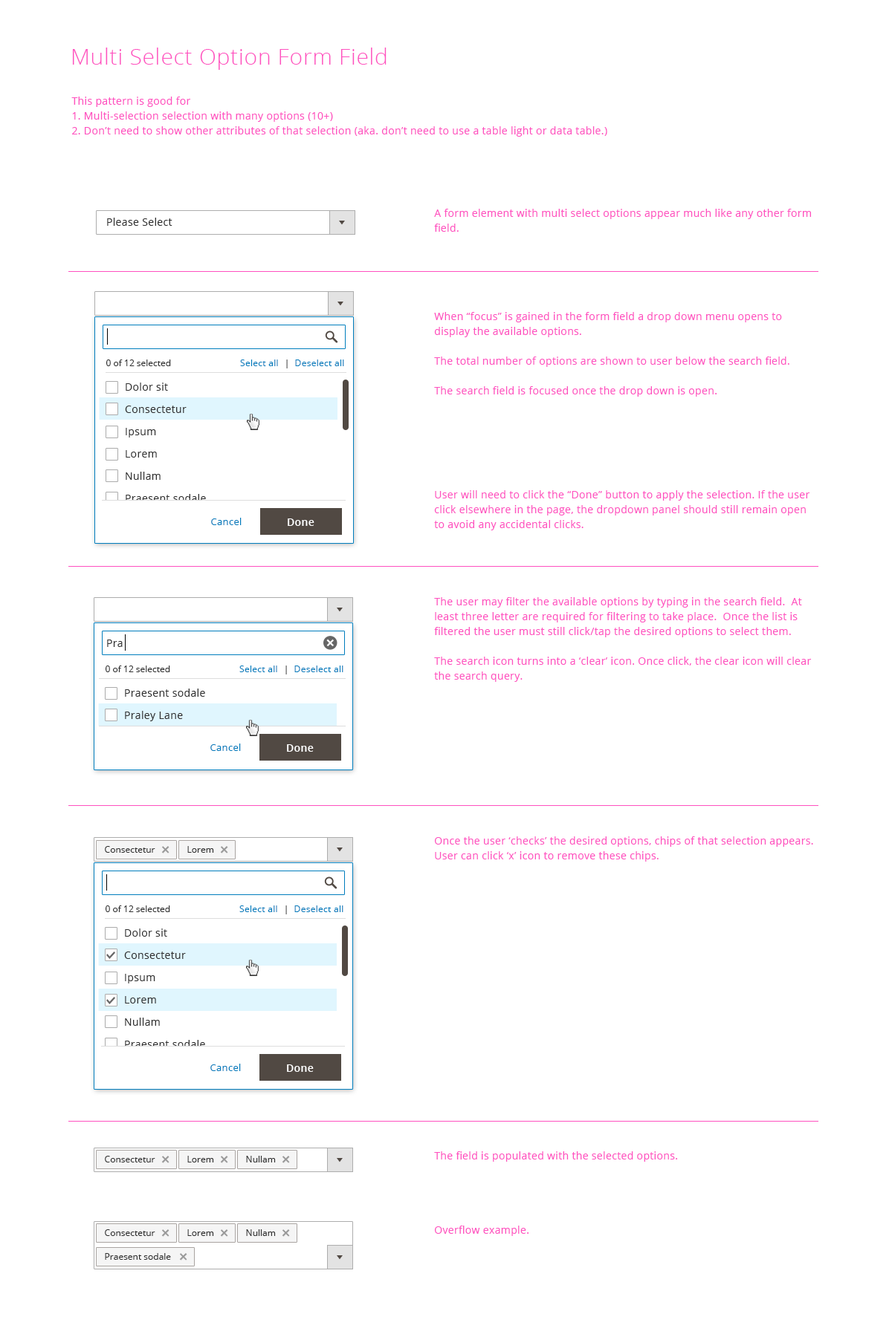
<style>
.page{position:relative;width:892px;height:1337px;background:#ffffff}
.page>*{position:absolute;margin:0}
.t1{font:22.3px "OpenSans-Light";letter-spacing:0.025em;color:#ff51c0}
.t2{font:10.4px/14.9px "OpenSans";letter-spacing:0.025em;color:#ff51c0}
.t3{font:10.4px "OpenSans";letter-spacing:0.025em;color:#303030}
.t4{font:8.9px "OpenSans";color:#303030}
.t5{font:8.9px "OpenSans";letter-spacing:0.025em;color:#007dbd}
.t6{font:8.9px "OpenSans";letter-spacing:0.025em;color:#111213}
.t7{font:10.4px/22.3px "OpenSans";letter-spacing:0.025em;color:#303030}
.t8{font:9.7px "OpenSans";letter-spacing:0.025em;color:#007dbd}
.t9{font:10.4px "OpenSans-Semibold";letter-spacing:0.025em;color:#fefefe}
.t10{font:17.8px "OpenSans-Semibold";color:#999999}
</style>
<div class="page">
<p class="t1" style="left:72px;top:48px;width:314px;height:22px">Multi Select Option Form Field</p>
<p class="t2" style="left:71px;top:97px;width:536px;height:40px">This pattern is good for <br>1. Multi-selection selection with many options (10+)<br>2. Don’t need to show other attributes of that selection (aka. don’t need to use a table light or data table.)</p>
<p class="t2" style="left:434px;top:209px;width:377px;height:23px">A form element with multi select options appear much like any other form field.</p>
<p class="t3" style="left:107px;top:218px;width:65px;height:8px">Please Select</p>
<p class="t2" style="left:434px;top:312px;width:376px;height:219px">When “focus” is gained in the form field a drop down menu opens to <br>display the available options. <br><br>The total number of options are shown to user below the search field.<br><br>The search field is focused once the drop down is open.<br><br><br><br><br><br><br>User will need to click the “Done” button to apply the selection. If the user click elsewhere in the page, the dropdown panel should still remain open<br>to avoid any accidental clicks.</p>
<p class="t4" style="left:106px;top:360px;width:65px;height:6px">0 of 12 selected</p>
<p class="t5" style="left:240px;top:360px;width:38px;height:6px">Select all</p>
<p class="t5" style="left:286px;top:360px;width:58px;height:9px"><span class="t6">|  </span>Deselect all</p>
<p class="t7" style="left:125px;top:383px;width:81px;height:119px">Dolor sit<br>Consectetur<br>Ipsum<br>Lorem<br>Nullam<br>Praesent sodale</p>
<p class="t8" style="left:211px;top:518px;width:30px;height:7px">Cancel</p>
<p class="t9" style="left:288px;top:519px;width:26px;height:7px">Done</p>
<p class="t2" style="left:434px;top:597px;width:377px;height:85px">The user may filter the available options by typing in the search field.  At least three letter are required for filtering to take place.  Once the list is filtered the user must still click/tap the desired options to select them.<br><br>The search icon turns into a ‘clear’ icon. Once click, the clear icon will clear<br>the search query.</p>
<p class="t3" style="left:107px;top:640px;width:16px;height:7px">Pra</p>
<p class="t4" style="left:106px;top:666px;width:64px;height:6px">0 of 12 selected</p>
<p class="t5" style="left:239px;top:666px;width:38px;height:6px">Select all</p>
<p class="t5" style="left:285px;top:666px;width:58px;height:9px"><span class="t6">|  </span>Deselect all</p>
<p class="t7" style="left:125px;top:689px;width:80px;height:32px">Praesent sodale <br>Praley Lane</p>
<p class="t8" style="left:210px;top:744px;width:31px;height:7px">Cancel</p>
<p class="t9" style="left:287px;top:744px;width:27px;height:8px">Done</p>
<p class="t2" style="left:435px;top:837px;width:378px;height:25px">Once the user ‘checks’ the desired options, chips of that selection appears.<br>User can click ‘x’ icon to remove these chips.</p>
<p class="t4" style="left:105px;top:846px;width:50px;height:7px">Consectetur</p>
<p class="t10" style="left:161px;top:846px;width:8px;height:8px;rotate:45deg">+</p>
<p class="t4" style="left:187px;top:846px;width:27px;height:7px">Lorem</p>
<p class="t10" style="left:220px;top:846px;width:8px;height:8px;rotate:45deg">+</p>
<p class="t4" style="left:106px;top:906px;width:64px;height:6px">0 of 12 selected</p>
<p class="t5" style="left:239px;top:906px;width:38px;height:6px">Select all</p>
<p class="t5" style="left:285px;top:906px;width:58px;height:9px"><span class="t6">|  </span>Deselect all</p>
<p class="t7" style="left:124px;top:929px;width:81px;height:119px">Dolor sit<br>Consectetur<br>Ipsum<br>Lorem<br>Nullam<br>Praesent sodale</p>
<p class="t8" style="left:210px;top:1064px;width:31px;height:7px">Cancel</p>
<p class="t9" style="left:287px;top:1065px;width:27px;height:7px">Done</p>
<p class="t4" style="left:105px;top:1156px;width:50px;height:7px">Consectetur</p>
<p class="t10" style="left:161px;top:1156px;width:8px;height:8px;rotate:45deg">+</p>
<p class="t4" style="left:187px;top:1156px;width:27px;height:7px">Lorem</p>
<p class="t10" style="left:220px;top:1156px;width:8px;height:8px;rotate:45deg">+</p>
<p class="t4" style="left:246px;top:1156px;width:30px;height:7px">Nullam</p>
<p class="t10" style="left:282px;top:1156px;width:8px;height:8px;rotate:45deg">+</p>
<p class="t2" style="left:434px;top:1152px;width:243px;height:84px">The field is populated with the selected options.<br><br><br><br><br>Overflow example.</p>
<p class="t4" style="left:105px;top:1230px;width:50px;height:6px">Consectetur</p>
<p class="t10" style="left:161px;top:1230px;width:8px;height:7px;rotate:45deg">+</p>
<p class="t4" style="left:187px;top:1230px;width:27px;height:6px">Lorem</p>
<p class="t10" style="left:220px;top:1230px;width:8px;height:7px;rotate:45deg">+</p>
<p class="t4" style="left:246px;top:1230px;width:30px;height:6px">Nullam</p>
<p class="t10" style="left:282px;top:1230px;width:8px;height:7px;rotate:45deg">+</p>
<p class="t4" style="left:105px;top:1253px;width:66px;height:7px">Praesent sodale</p>
<p class="t10" style="left:179px;top:1253px;width:8px;height:8px;rotate:45deg">+</p>
</div>
